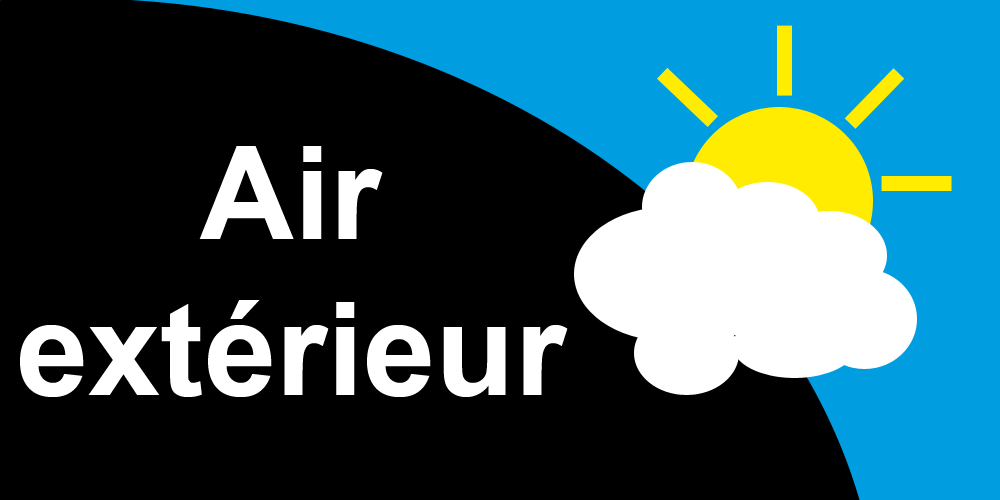
<style>
.page{position:relative;width:1000px;height:500px;background:#000000}
.page>*{position:absolute;margin:0}
.t1{font:130px "Arial-BoldMT";color:#ffffff}
</style>
<div class="page">
<p class="t1" style="left:20px;top:146px;width:548px;height:251px;text-align:center">Air<br>extérieur</p>
</div>
